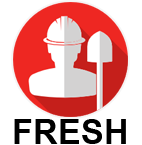
<style>
.page{position:relative;width:142px;height:145px;background:#ffffff}
.page>*{position:absolute;margin:0}
.t1{font:34px "Arial-BoldMT";letter-spacing:0.01em;color:#000000}
</style>
<div class="page">
<p class="t1" style="left:14px;top:119px;width:112px;height:25px">FRESH</p>
</div>
